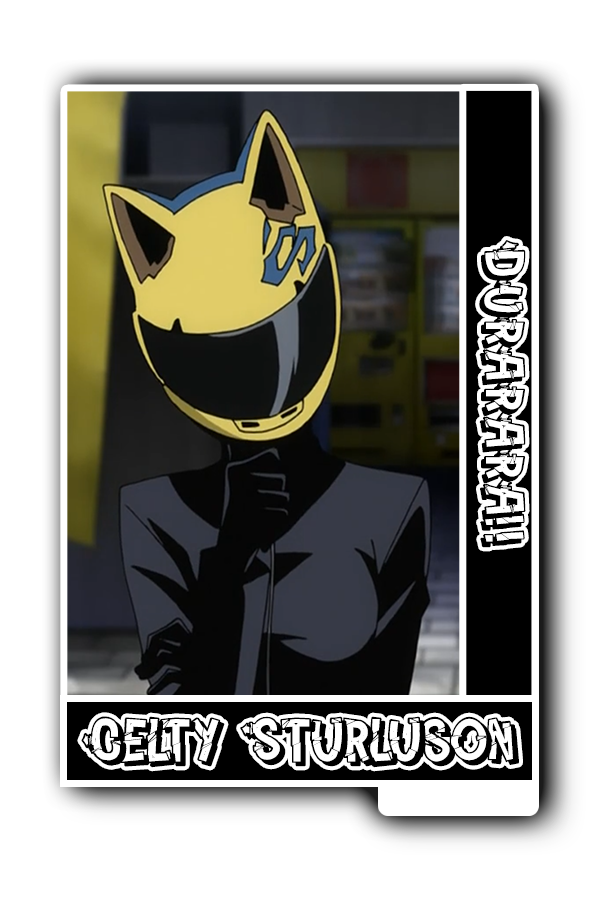
<style>
.page{position:relative;width:600px;height:900px;background:#ffffff}
.page>*{position:absolute;margin:0}
.t1{font:61px "PeintureFraiche";color:#000000}
.t2{font:67px "PeintureFraiche";color:#000000}
</style>
<div class="page">
<p class="t1" style="left:479px;top:239px;width:47px;height:309px;rotate:90deg">DURARARA!!</p>
<p class="t2" style="left:80px;top:716px;width:440px;height:52px">Celty Sturluson</p>
</div>
